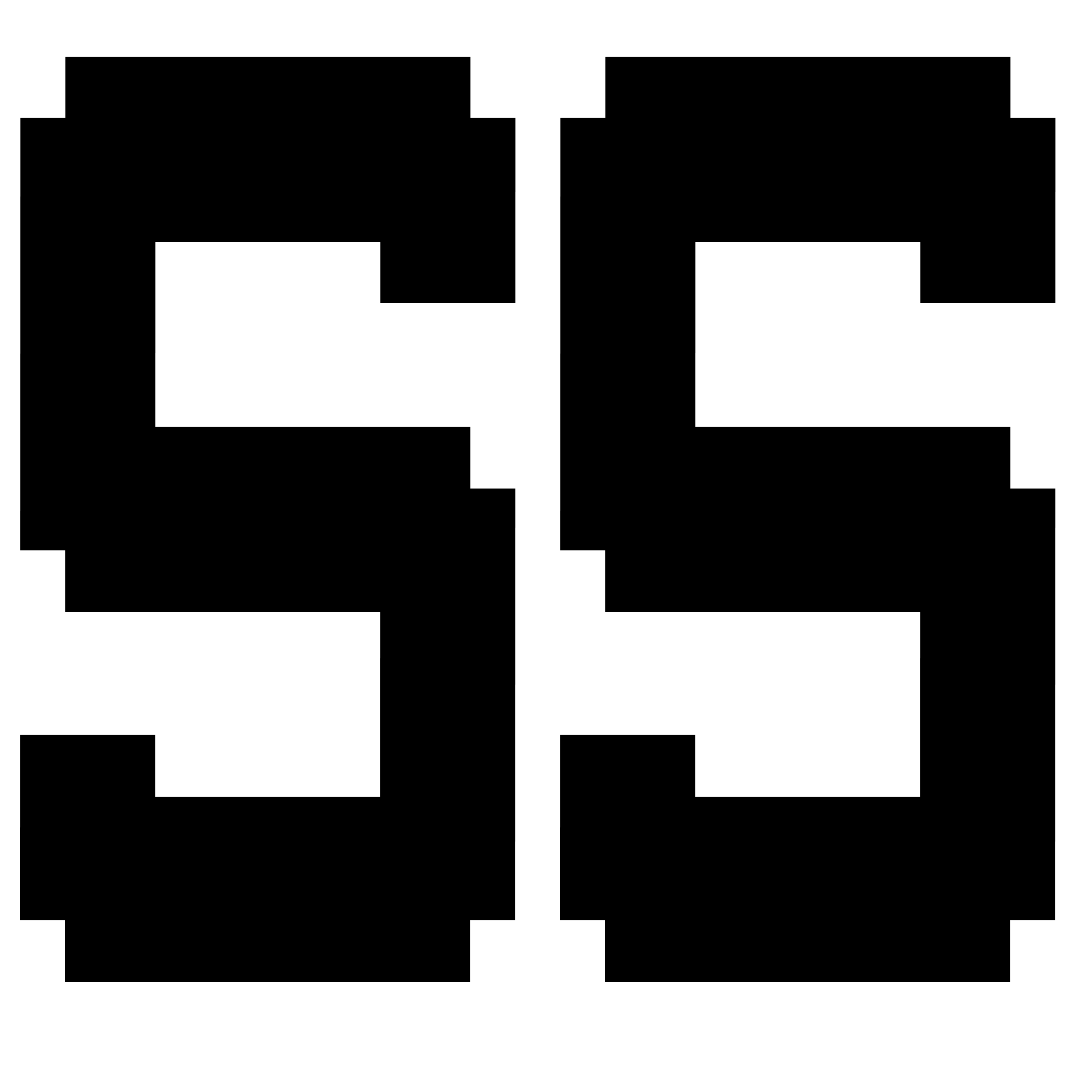
<style>
.page{position:relative;width:1080px;height:1080px;background:#000000}
.page>*{position:absolute;margin:0}
.t1{font:987.4px "Gameplay";color:#000000;scale:0.73 1}
</style>
<div class="page">
<p class="t1" style="left:20px;top:56px;width:1036px;height:926px">SS</p>
</div>
